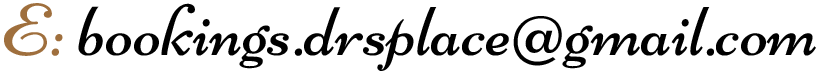
<style>
.page{position:relative;width:820px;height:75px;background:#ffffff}
.page>*{position:absolute;margin:0}
.t1{font:73.8px "Niconne-Regular";color:#000000}
.t2{font:73.8px "Niconne-Regular";color:#9f6f3d}
</style>
<div class="page">
<p class="t1" style="left:4px;top:3px;width:812px;height:68px"><span class="t2">E: </span>bookings.drsplace@gmail.com</p>
</div>
